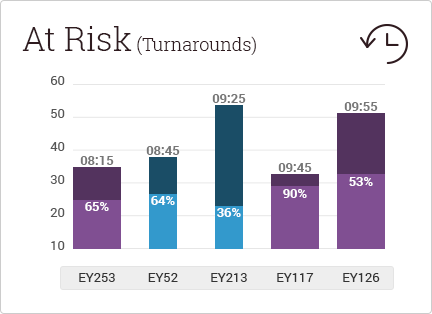
<style>
.page{position:relative;width:432px;height:314px;background:#ffffff}
.page>*{position:absolute;margin:0}
.t1{font:18px "RobotoSlab-Light";color:#2f1b1f}
.t2{font:33px "RobotoSlab-Light";color:#2f1b1f}
.t3{font:13px "Roboto-Regular";color:#555555}
.t4{font:13px "Roboto-Bold";color:#767676}
.t5{font:13px "Roboto-Bold";color:#ffffff}
.t6{font:13px "Roboto-Regular";color:#333333}
</style>
<div class="page">
<p class="t1" style="left:22px;top:26px;width:234px;height:29px"><span class="t2">At Risk</span> (Turnarounds)</p>
<p class="t3" style="left:51px;top:76px;width:14px;height:9px">60</p>
<p class="t4" style="left:212px;top:94px;width:34px;height:9px">09:25</p>
<p class="t4" style="left:344px;top:102px;width:34px;height:9px">09:55</p>
<p class="t3" style="left:51px;top:109px;width:14px;height:9px">50</p>
<p class="t3" style="left:50px;top:142px;width:15px;height:9px">40</p>
<p class="t4" style="left:146px;top:146px;width:34px;height:9px">08:45</p>
<p class="t4" style="left:80px;top:156px;width:34px;height:9px">08:15</p>
<p class="t4" style="left:278px;top:163px;width:34px;height:9px">09:45</p>
<p class="t3" style="left:50px;top:175px;width:15px;height:9px">30</p>
<p class="t5" style="left:349px;top:177px;width:24px;height:9px">53%</p>
<p class="t5" style="left:151px;top:196px;width:24px;height:9px">64%</p>
<p class="t5" style="left:283px;top:189px;width:24px;height:9px">90%</p>
<p class="t3" style="left:50px;top:208px;width:15px;height:9px">20</p>
<p class="t5" style="left:85px;top:202px;width:24px;height:9px">65%</p>
<p class="t5" style="left:217px;top:208px;width:24px;height:9px">36%</p>
<p class="t3" style="left:51px;top:241px;width:14px;height:9px">10</p>
<p class="t6" style="left:79px;top:273px;width:36px;height:9px">EY253</p>
<p class="t6" style="left:148px;top:273px;width:30px;height:9px">EY52</p>
<p class="t6" style="left:211px;top:273px;width:36px;height:9px">EY213</p>
<p class="t6" style="left:277px;top:273px;width:37px;height:9px">EY117</p>
<p class="t6" style="left:343px;top:273px;width:37px;height:9px">EY126</p>
</div>
